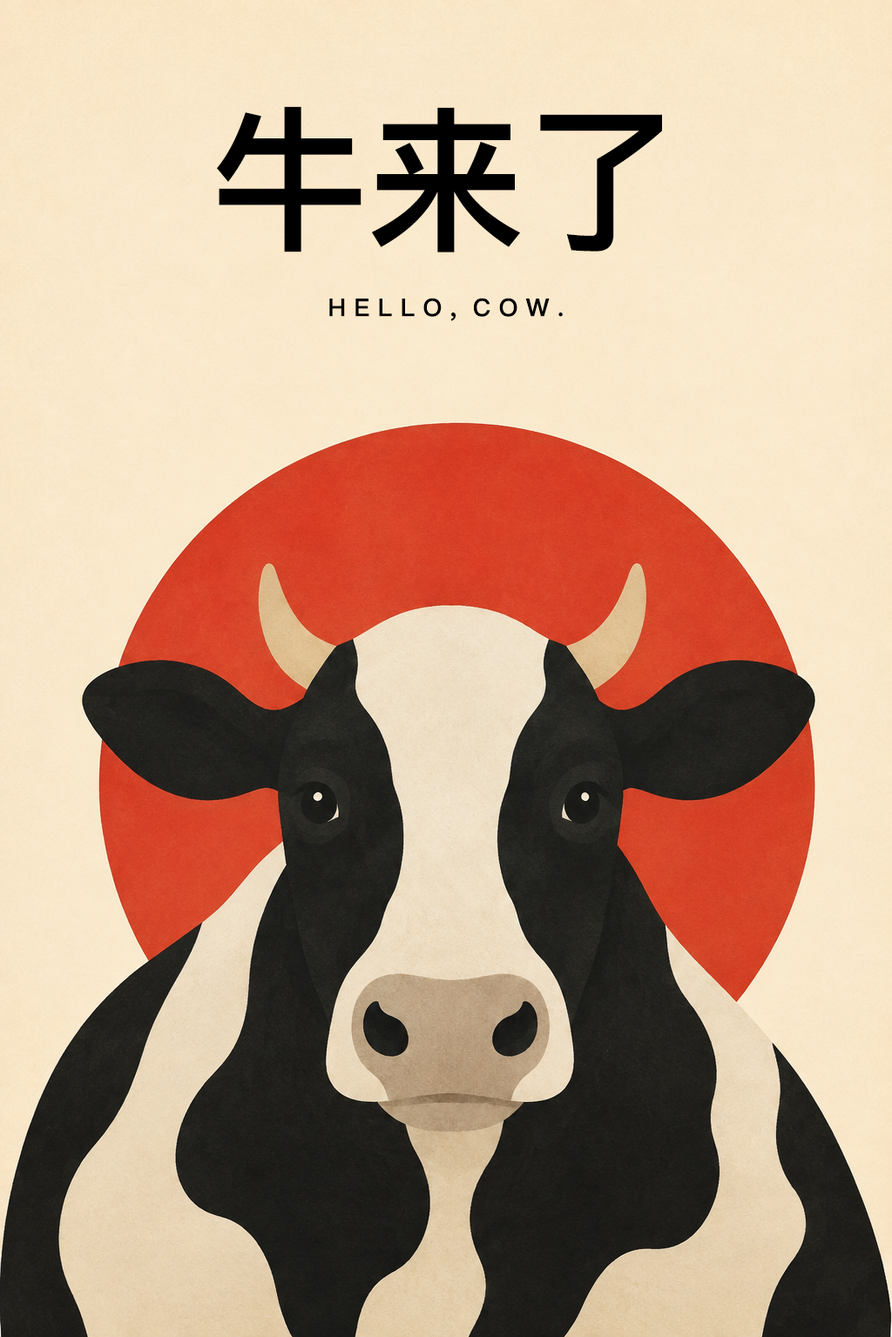
<style>
.page{position:relative;width:892px;height:1337px}
.page>*{position:absolute;margin:0}
.t1{font:156.7px "PingFangSC-Semibold";color:#000000}
.t2{font:24.4px "PingFangSC-Semibold";color:#000000}
</style>
<div class="page">
<p class="t1" style="left:217px;top:106px;width:445px;height:147px">牛来了</p>
<p class="t2" style="left:329px;top:298px;width:233px;height:23px">H E L L O ,  C O W .</p>
</div>
